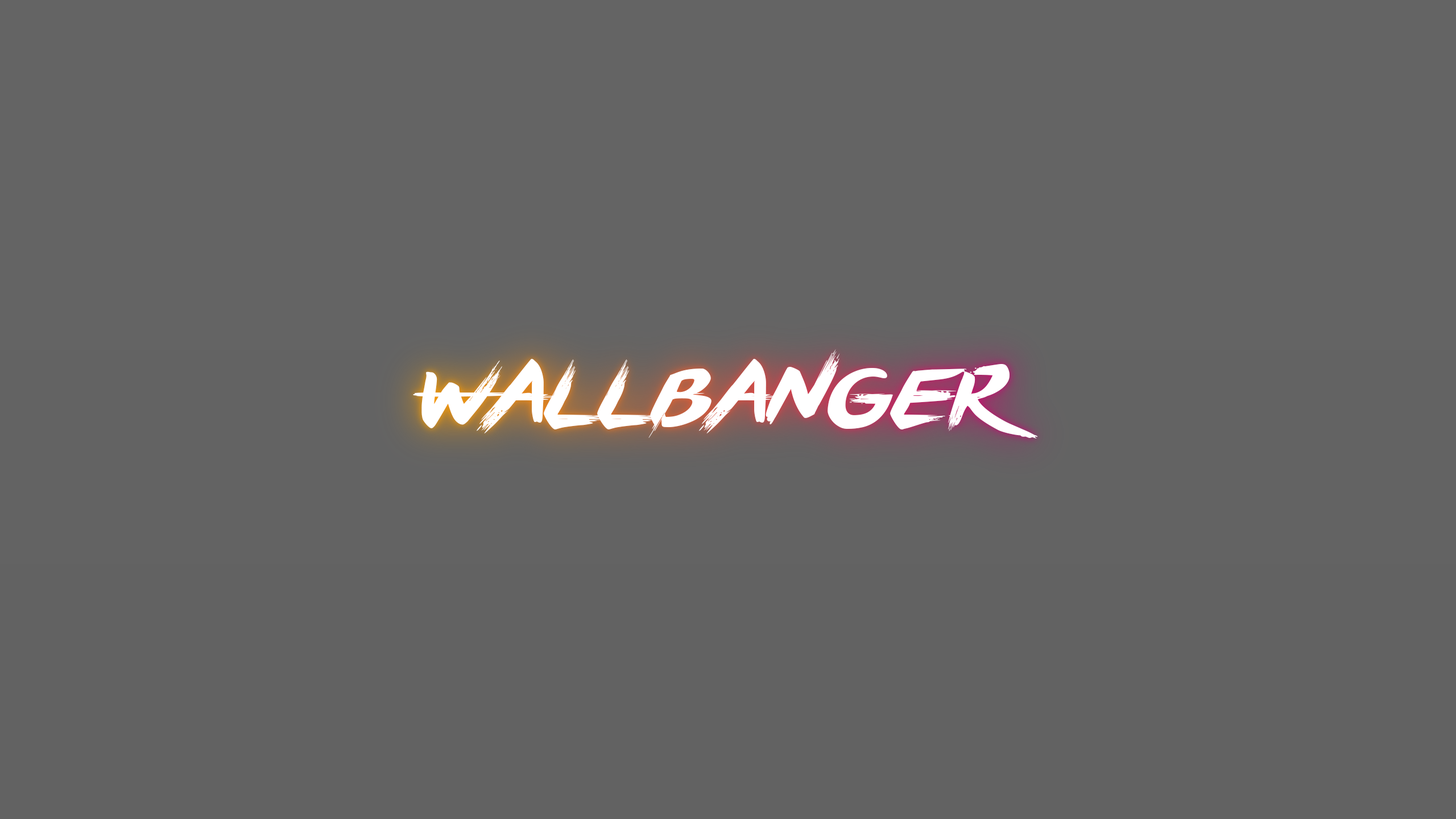
<style>
.page{position:relative;width:1456px;height:819px;background:#646464}
.page>*{position:absolute;margin:0}
.t1{font:114.9px "BRUSHSTRIKE";color:#ffffff}
</style>
<div class="page">
<p class="t1" style="left:413px;top:349px;width:625px;height:90px">Wallbanger</p>
</div>
